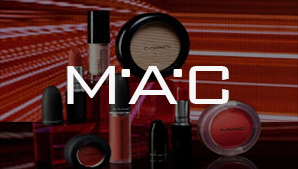
<style>
.page{position:relative;width:298px;height:169px}
.page>*{position:absolute;margin:0}
.t1{font:74.1px "BankGothicBT-Light";letter-spacing:0.01em;color:#f6f6f6}
</style>
<div class="page">
<p class="t1" style="left:67px;top:66px;width:162px;height:38px">MAC</p>
<p class="t1" style="left:121px;top:69px;width:9px;height:8px">.</p>
<p class="t1" style="left:173px;top:69px;width:9px;height:8px">.</p>
</div>
